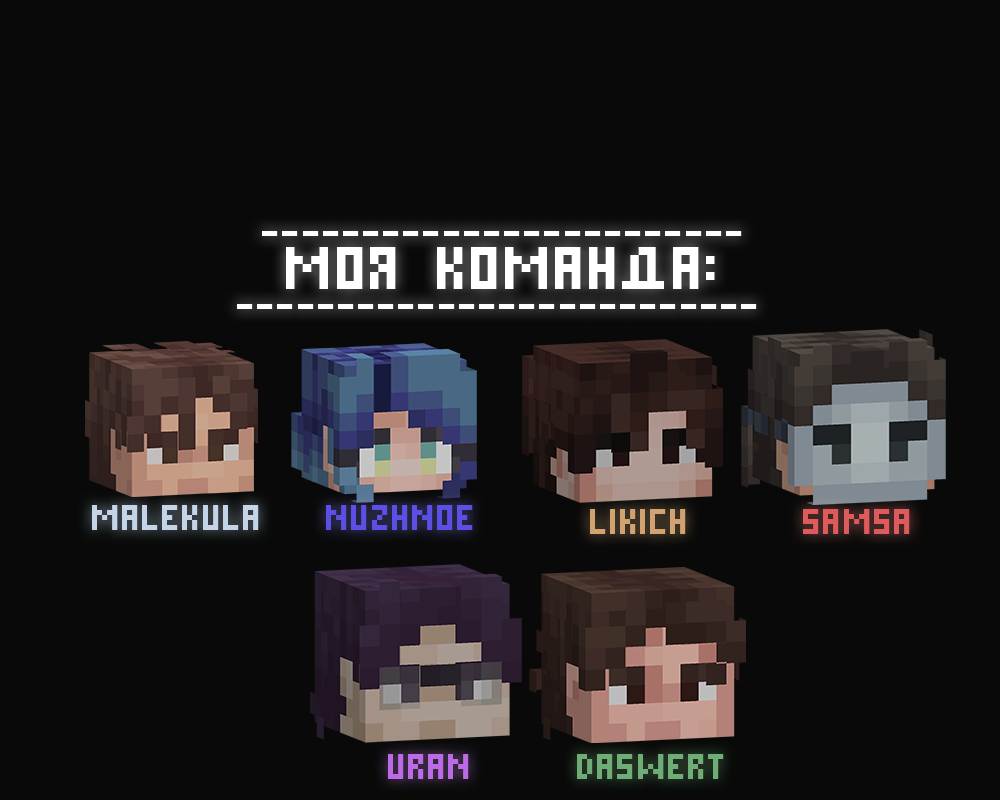
<style>
.page{position:relative;width:1000px;height:800px;background:#080908}
.page>*{position:absolute;margin:0}
.t1{font:36px "PixelCyr-Normal";color:#ffffff}
.t2{font:60px "PixelCyr-Normal";color:#ffffff}
.t3{font:36px "PixelCyr-Normal";color:#c4d5e8}
.t4{font:36px "PixelCyr-Normal";color:#5c4fe5}
.t5{font:36px "PixelCyr-Normal";color:#d2a371}
.t6{font:36px "PixelCyr-Normal";color:#df5a5a}
.t7{font:36px "PixelCyr-Normal";color:#bc6ae5}
.t8{font:36px "PixelCyr-Normal";color:#6eae76}
</style>
<div class="page">
<p class="t1" style="left:262px;top:231px;width:480px;height:5px">________________________</p>
<p class="t2" style="left:286px;top:247px;width:429px;height:42px">Моя команда:</p>
<p class="t1" style="left:237px;top:304px;width:520px;height:5px">__________________________</p>
<p class="t3" style="left:92px;top:505px;width:167px;height:25px">malekula</p>
<p class="t4" style="left:326px;top:505px;width:147px;height:25px">nuzhnoe</p>
<p class="t5" style="left:590px;top:509px;width:96px;height:25px">likich</p>
<p class="t6" style="left:803px;top:509px;width:107px;height:25px">samsa</p>
<p class="t7" style="left:388px;top:754px;width:81px;height:25px">uran</p>
<p class="t8" style="left:577px;top:754px;width:147px;height:25px">daswert</p>
</div>
